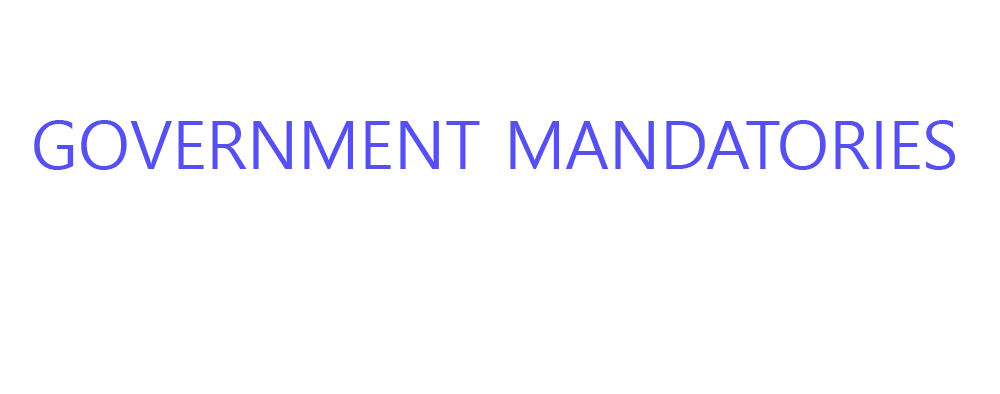
<style>
.page{position:relative;width:1000px;height:394px;background:#ffffff}
.page>*{position:absolute;margin:0}
.t1{font:66.7px "MalgunGothic";color:#5750f0}
</style>
<div class="page">
<p class="t1" style="left:34px;top:120px;width:921px;height:50px">GOVERNMENT MANDATORIES</p>
</div>
